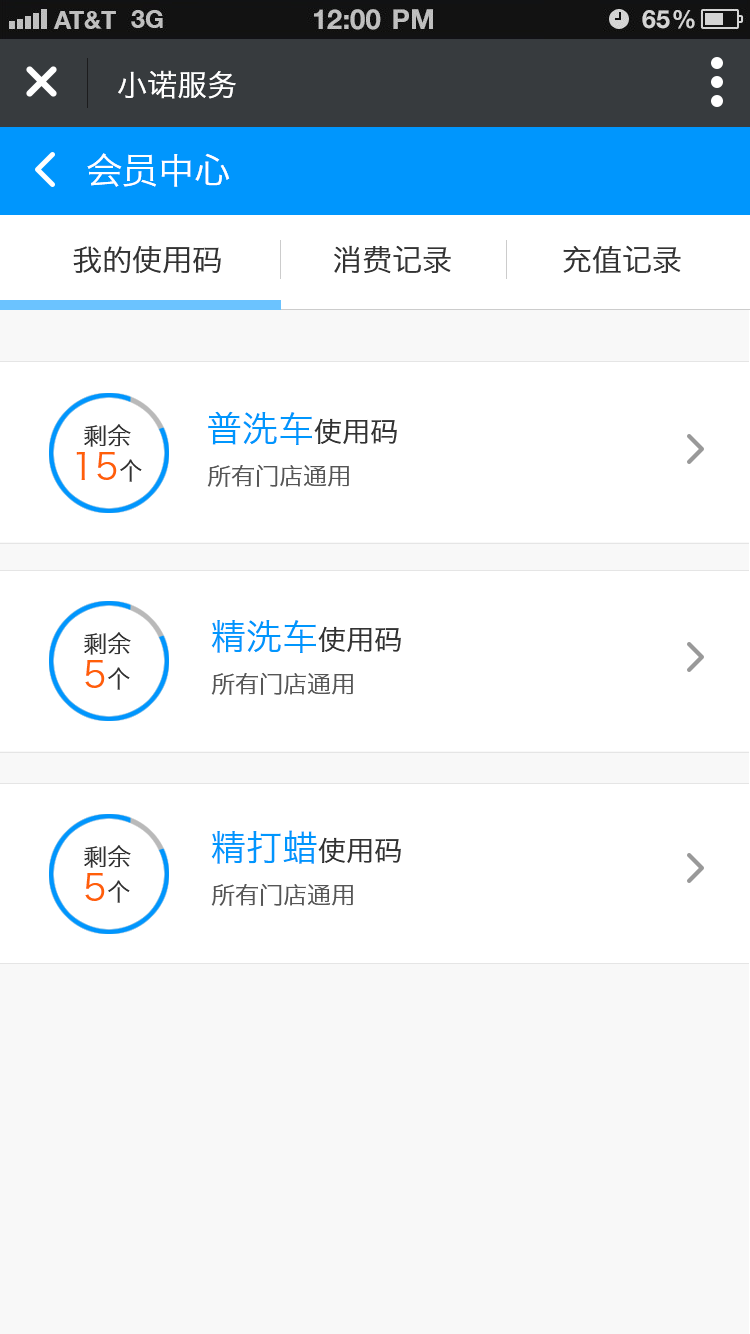
<style>
.page{position:relative;width:750px;height:1334px;background:#ffffff}
.page>*{position:absolute;margin:0}
.t1{font:30px "HiraginoSansGB-W3";color:#ffffff}
.t2{font:36px "HiraginoSansGB-W3";color:#ffffff}
.t3{font:30px "HiraginoSansGB-W3";color:#333333}
.t4{font:36px "HiraginoSansGB-W3";color:#0096fd}
.t5{font:28px "HiraginoSansGB-W3";color:#333333}
.t6{font:24px/24px "HiraginoSansGB-W3";color:#333333}
.t7{font:36px/24px "HiraginoSansGB-W3";color:#ff5f08}
.t8{font:24px "HiraginoSansGB-W3";color:#565656}
</style>
<div class="page">
<p class="t1" style="left:118px;top:70px;width:118px;height:29px">小诺服务</p>
<p class="t2" style="left:87px;top:153px;width:143px;height:34px">会员中心</p>
<p class="t3" style="left:73px;top:245px;width:608px;height:29px">我的使用码           消费记录           充值记录</p>
<p class="t4" style="left:208px;top:411px;width:189px;height:34px">普洗车<span class="t5">使用码</span></p>
<p class="t6" style="left:76px;top:424px;width:66px;height:58px;text-align:center">剩余<br><span class="t7">15</span>个</p>
<p class="t8" style="left:207px;top:464px;width:142px;height:23px">所有门店通用</p>
<p class="t4" style="left:211px;top:620px;width:190px;height:33px">精洗车<span class="t5">使用码</span></p>
<p class="t6" style="left:84px;top:632px;width:47px;height:58px;text-align:center">剩余<br><span class="t7">5</span>个</p>
<p class="t8" style="left:211px;top:672px;width:142px;height:23px">所有门店通用</p>
<p class="t4" style="left:211px;top:830px;width:190px;height:34px">精打蜡<span class="t5">使用码</span></p>
<p class="t6" style="left:84px;top:845px;width:47px;height:58px;text-align:center">剩余<br><span class="t7">5</span>个</p>
<p class="t8" style="left:211px;top:883px;width:142px;height:23px">所有门店通用</p>
</div>
